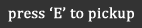
<style>
.page{position:relative;width:142px;height:28px;background:#333333}
.page>*{position:absolute;margin:0}
.t1{font:15.4px "Cambria";color:#ffffff;font-weight:bold}
</style>
<div class="page">
<p class="t1" style="left:8px;top:7px;width:126px;height:15px">press ‘E’ to pickup</p>
</div>
